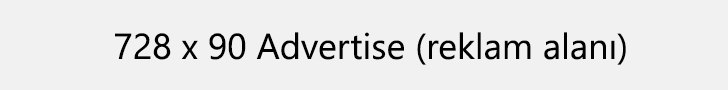
<style>
.page{position:relative;width:728px;height:90px;background:#f1f1f1}
.page>*{position:absolute;margin:0}
.t1{font:36px "Gadugi";color:#010101}
</style>
<div class="page">
<p class="t1" style="left:115px;top:32px;width:511px;height:33px">728 x 90 Advertise (reklam alanı)</p>
</div>
